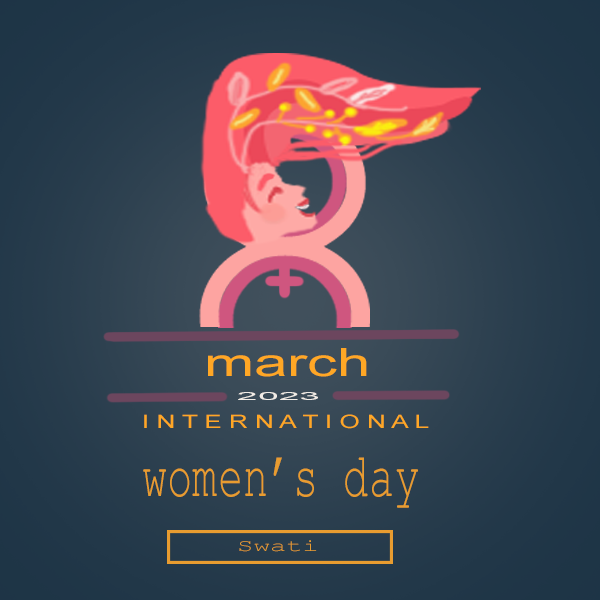
<style>
.page{position:relative;width:600px;height:600px}
.page>*{position:absolute;margin:0}
.t1{font:38.9px "ArialMT";color:#ffa725;scale:1.54 1}
.t2{font:11px "ArialMT";color:#f1ece6;scale:3.39 1}
.t3{font:18.6px "ArialMT";color:#ffa725;scale:1.4 1}
.t4{font:62.8px "CourierNewPSMT";color:#e89c30;scale:0.67 1}
.t5{font:17.1px "CourierNewPSMT";color:#e89c30;scale:1.6 1}
</style>
<div class="page">
<p class="t1" style="left:208px;top:348px;width:159px;height:29px">march</p>
<p class="t2" style="left:238px;top:392px;width:80px;height:8px">2023</p>
<p class="t3" style="left:144px;top:414px;width:285px;height:15px">I N T E R N A T I O N A L</p>
<p class="t4" style="left:143px;top:457px;width:275px;height:51px">women’s day</p>
<p class="t5" style="left:239px;top:540px;width:78px;height:12px">Swati</p>
</div>
